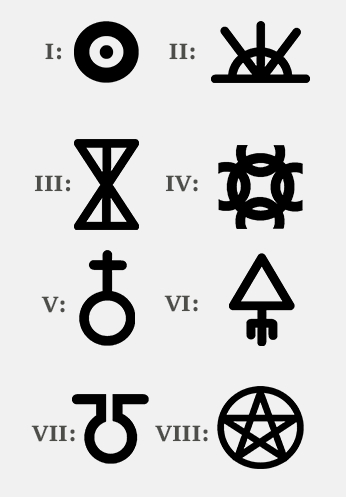
<style>
.page{position:relative;width:346px;height:497px;background:#f1f1f1}
.page>*{position:absolute;margin:0}
.t1{font:24px "Sitka-TextBold";color:#4d4d49}
</style>
<div class="page">
<p class="t1" style="left:45px;top:43px;width:17px;height:17px">I:</p>
<p class="t1" style="left:169px;top:43px;width:26px;height:17px">II:</p>
<p class="t1" style="left:34px;top:175px;width:37px;height:17px">III:</p>
<p class="t1" style="left:165px;top:175px;width:33px;height:17px">IV:</p>
<p class="t1" style="left:41px;top:296px;width:24px;height:17px">V:</p>
<p class="t1" style="left:164px;top:295px;width:34px;height:17px">VI:</p>
<p class="t1" style="left:31px;top:425px;width:44px;height:17px">VII:</p>
<p class="t1" style="left:155px;top:425px;width:53px;height:17px">VIII:</p>
</div>
